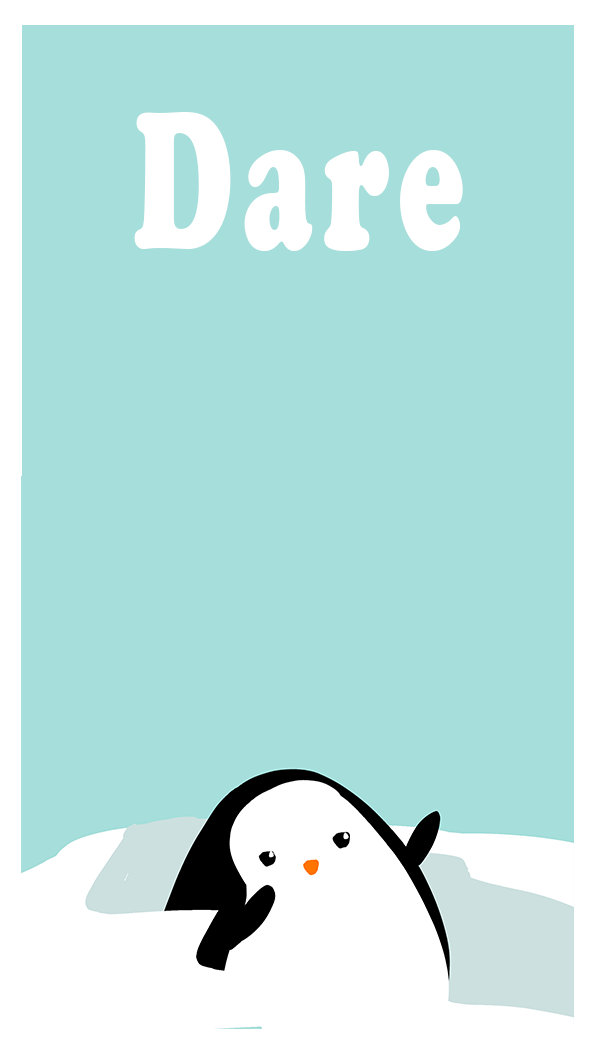
<style>
.page{position:relative;width:600px;height:1050px;background:#a5deda}
.page>*{position:absolute;margin:0}
.t1{font:200px "CooperBlack";letter-spacing:0.075em;color:#ffffff;scale:0.62 1}
</style>
<div class="page">
<p class="t1" style="left:134px;top:112px;width:329px;height:139px">Dare</p>
</div>
